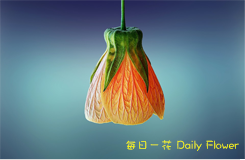
<style>
.page{position:relative;width:245px;height:160px}
.page>*{position:absolute;margin:0}
.t1{font:12px "DFWaWaSC-W5"}
</style>
<div class="page">
<p class="t1" style="left:126px;top:140px;width:113px;height:11px">每日一花 Daily Flower</p>
</div>
